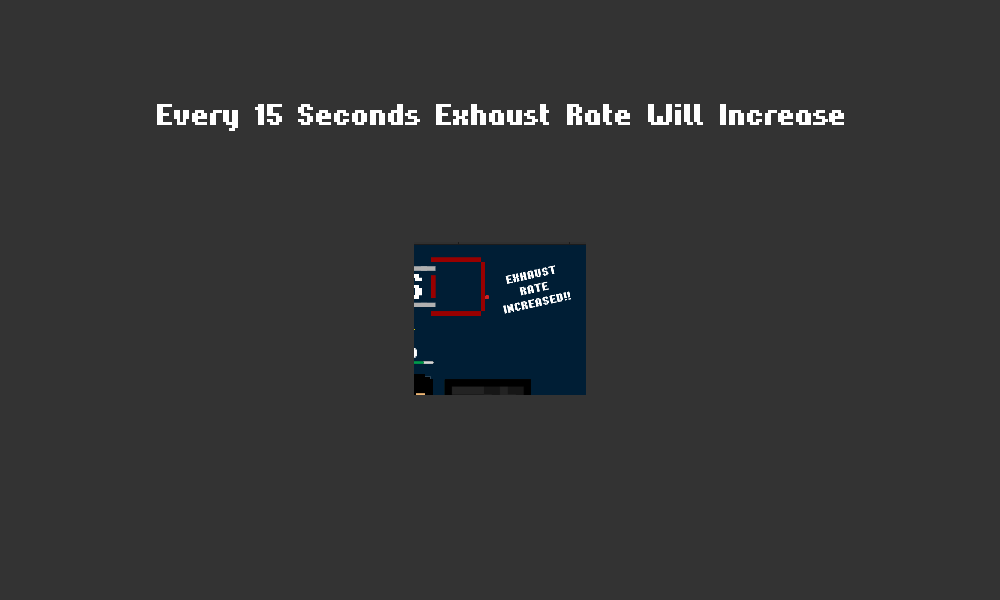
<style>
.page{position:relative;width:1000px;height:600px;background:#333333}
.page>*{position:absolute;margin:0}
.t1{font:30px "Hardpixel";color:#ffffff}
</style>
<div class="page">
<p class="t1" style="left:157px;top:104px;width:687px;height:27px">Every 15 Seconds Exhaust Rate Will Increase</p>
</div>
